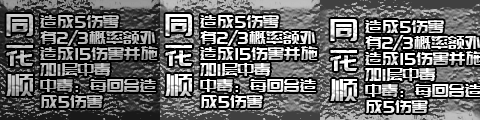
<style>
.page{position:relative;width:480px;height:120px;background:#000000}
.page>*{position:absolute;margin:0}
.t1{font:30px/30px "PangMenZhengDao";letter-spacing:-0.01em;color:#bfbfbf}
.t2{font:18px/16px "PangMenZhengDao";letter-spacing:-0.01em;color:#bfbfbf}
.t3{font:30px/30px "PangMenZhengDao";letter-spacing:-0.01em;color:#ffffff}
.t4{font:18px/16px "PangMenZhengDao";letter-spacing:-0.01em;color:#ffffff}
</style>
<div class="page">
<p class="t1" style="left:6px;top:14px;width:27px;height:82px">同<br>花<br>顺</p>
<p class="t2" style="left:40px;top:15px;width:118px;height:93px">造成5伤害<br>有2/3概率额外造成15伤害并施加1层中毒<br>中毒：每回合造成5伤害</p>
<p class="t3" style="left:165px;top:14px;width:27px;height:82px">同<br>花<br>顺</p>
<p class="t4" style="left:200px;top:15px;width:118px;height:93px">造成5伤害<br>有2/3概率额外造成15伤害并施加1层中毒<br>中毒：每回合造成5伤害</p>
<p class="t3" style="left:330px;top:19px;width:27px;height:82px">同<br>花<br>顺</p>
</div>
